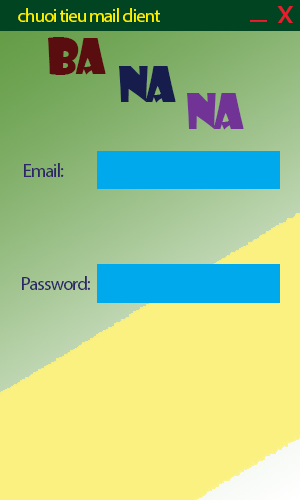
<style>
.page{position:relative;width:300px;height:500px;background:#faf180}
.page>*{position:absolute;margin:0}
.t1{font:18.7px "MyriadPro-Regular";letter-spacing:-0.05em;color:#fff200}
.t2{font:48px "ShowcardGothic-Reg";letter-spacing:-0.05em;color:#590d0e}
.t3{font:48px "ShowcardGothic-Reg";letter-spacing:-0.05em;color:#161d4c}
.t4{font:48px "ShowcardGothic-Reg";letter-spacing:-0.05em;color:#713496}
</style>
<div class="page">
<p class="t1" style="left:18px;top:8px;width:142px;height:14px">chuoi tieu mail client</p>
<p class="t2" style="left:48px;top:37px;width:58px;height:38px">BA</p>
<p class="t3" style="left:119px;top:66px;width:57px;height:37px">NA</p>
<p class="t4" style="left:187px;top:93px;width:57px;height:37px">NA</p>
</div>
